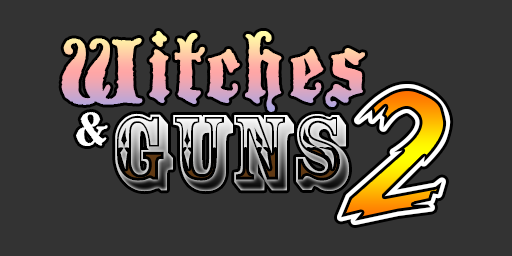
<style>
.page{position:relative;width:512px;height:256px;background:#333333}
.page>*{position:absolute;margin:0}
.t1{font:100px "BlackwoodCastle";letter-spacing:0.025em}
.t2{font:200px "BrasblusHighlight";letter-spacing:0.025em;color:#ffffff}
.t3{font:50px "BlackwoodCastle";letter-spacing:0.025em;color:#ffffff}
.t4{font:100px "RosewoodStd-Regular";letter-spacing:0.025em}
</style>
<div class="page">
<p class="t1" style="left:61px;top:31px;width:304px;height:81px">Witches</p>
<p class="t2" style="left:337px;top:84px;width:114px;height:141px">2</p>
<p class="t3" style="left:76px;top:112px;width:32px;height:34px">&amp;</p>
<p class="t4" style="left:115px;top:113px;width:234px;height:79px">Guns</p>
</div>
